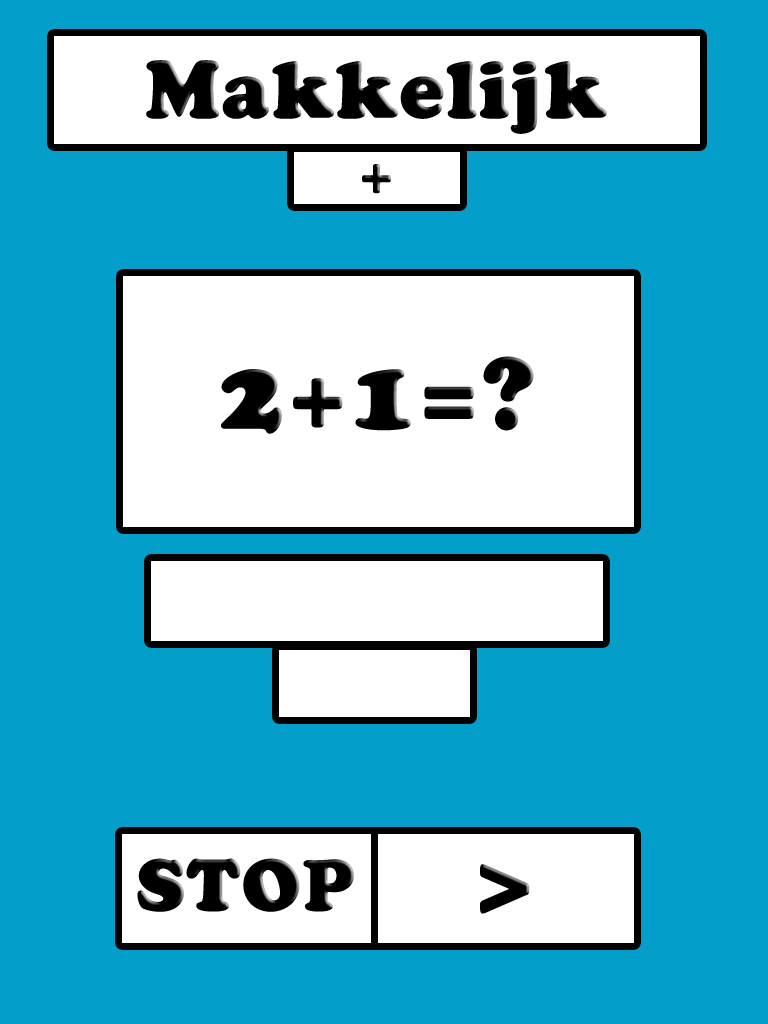
<style>
.page{position:relative;width:768px;height:1024px;background:#039eca}
.page>*{position:absolute;margin:0}
.t1{font:80px "CooperBlackStd";color:#000000;font-weight:bold}
.t2{font:60px "CooperBlackStd";color:#000000}
.t3{font:100px "CooperBlackStd";color:#000000;font-weight:bold}
.t4{font:72px "CooperBlackStd";color:#000000;font-weight:bold}
</style>
<div class="page">
<p class="t1" style="left:146px;top:60px;width:461px;height:74px">Makkelijk</p>
<p class="t2" style="left:362px;top:164px;width:29px;height:30px">+</p>
<p class="t3" style="left:221px;top:356px;width:313px;height:78px">2+1=?</p>
<p class="t4" style="left:137px;top:858px;width:217px;height:54px">STOP</p>
<p class="t3" style="left:480px;top:864px;width:50px;height:50px">&gt;</p>
</div>
